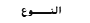
<style>
.page{position:relative;width:90px;height:23px;background:#ffffff}
.page>*{position:absolute;margin:0}
.t1{font:12px "BoutrosAdsMedium";color:#0c0b0b}
</style>
<div class="page">
<p class="t1" style="left:21px;top:6px;width:41px;height:11px">النــوع</p>
</div>
